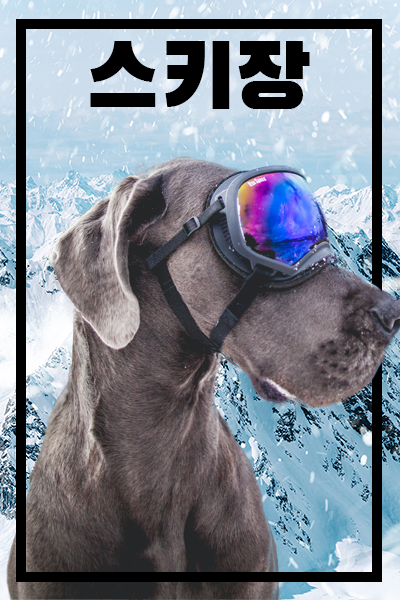
<style>
.page{position:relative;width:400px;height:600px}
.page>*{position:absolute;margin:0}
.t1{font:90px "BlackHanSans-Regular";color:#000000}
</style>
<div class="page">
<p class="t1" style="left:90px;top:41px;width:220px;height:68px">스키장</p>
</div>
